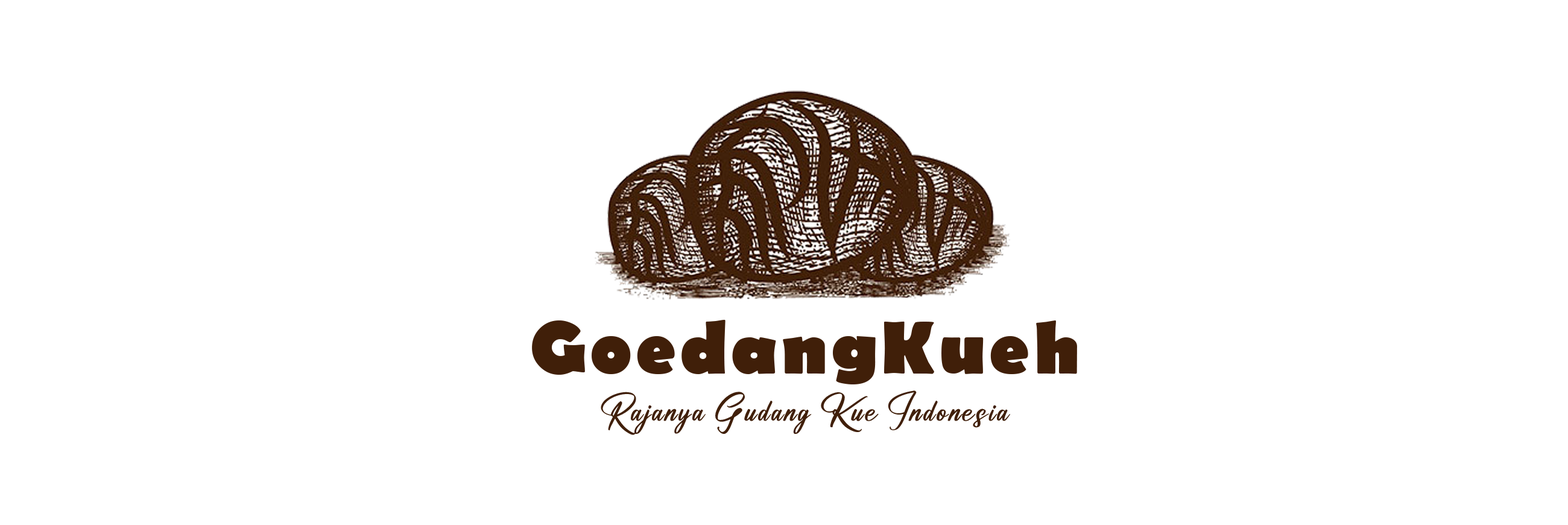
<style>
.page{position:relative;width:1568px;height:525px;background:#ffffff}
.page>*{position:absolute;margin:0}
.t1{font:75.4px "BerlinSansFB-Bold";letter-spacing:0.05em;color:#401f09}
.t2{font:35.2px "AnthonyHunter";letter-spacing:0.05em;color:#401f09}
</style>
<div class="page">
<p class="t1" style="left:532px;top:320px;width:545px;height:64px">GoedangKueh</p>
<p class="t2" style="left:601px;top:390px;width:409px;height:45px">Rajanya Gudang Kue Indonesia</p>
</div>
